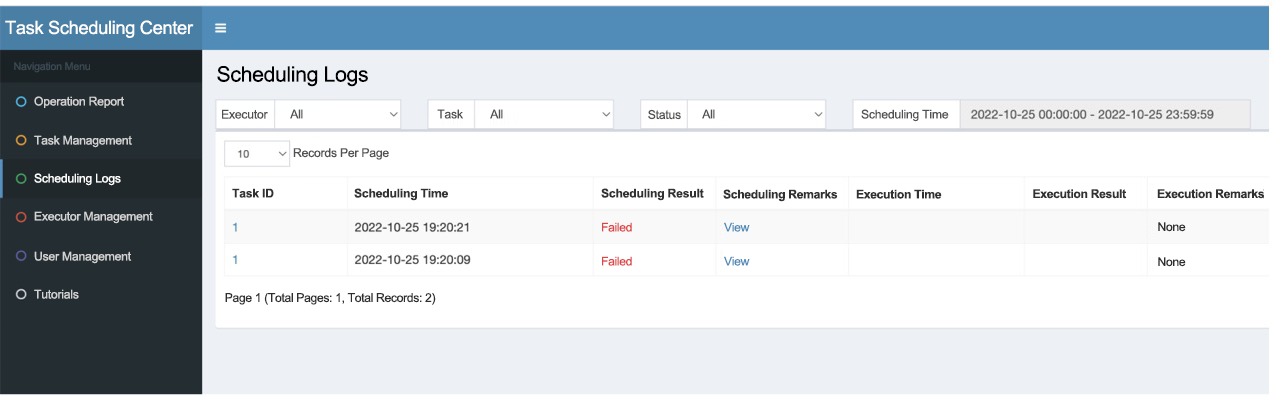
<style>
.page{position:relative;width:1274px;height:397px;background:#ffffff}
.page>*{position:absolute;margin:0}
.t1{font:18.3px "ArialMT";letter-spacing:-0.02em;color:#ffffff}
.t2{font:10.7px "ArialMT";letter-spacing:-0.02em;color:#3b4952}
.t3{font:21.4px "ArialMT";letter-spacing:-0.02em;color:#000000}
.t4{font:12.2px "ArialMT";letter-spacing:-0.02em;color:#d2d2d2}
.t5{font:12.2px "ArialMT";letter-spacing:-0.02em;color:#515151}
.t6{font:12.2px "ArialMT";letter-spacing:-0.02em;color:#ffffff}
.t7{font:12.2px "Arial-BoldMT";letter-spacing:-0.02em;color:#313131}
.t8{font:12.2px "Arial-BoldMT";letter-spacing:-0.03em;color:#313131}
.t9{font:12.2px "ArialMT";letter-spacing:-0.03em;color:#de4747}
.t10{font:12.2px "ArialMT";letter-spacing:-0.03em;color:#518cb8}
.t11{font:12.2px "ArialMT";letter-spacing:-0.03em;color:#2e2e2e}
</style>
<div class="page">
<p class="t1" style="left:5px;top:20px;width:189px;height:18px">Task Scheduling Center</p>
<p class="t2" style="left:14px;top:62px;width:76px;height:11px">Navigation Menu</p>
<p class="t3" style="left:217px;top:66px;width:151px;height:21px">Scheduling Logs</p>
<p class="t4" style="left:34px;top:96px;width:90px;height:12px">Operation Report</p>
<p class="t5" style="left:222px;top:109px;width:46px;height:10px">Executor</p>
<p class="t5" style="left:290px;top:109px;width:13px;height:10px">All</p>
<p class="t5" style="left:437px;top:109px;width:26px;height:10px">Task</p>
<p class="t5" style="left:490px;top:109px;width:13px;height:10px">All</p>
<p class="t5" style="left:648px;top:109px;width:33px;height:11px">Status</p>
<p class="t5" style="left:702px;top:109px;width:13px;height:10px">All</p>
<p class="t5" style="left:861px;top:109px;width:88px;height:13px">Scheduling Time</p>
<p class="t4" style="left:34px;top:135px;width:98px;height:13px">Task Management</p>
<p class="t5" style="left:293px;top:148px;width:96px;height:12px">Records Per Page</p>
<p class="t6" style="left:34px;top:173px;width:87px;height:13px">Scheduling Logs</p>
<p class="t7" style="left:232px;top:188px;width:42px;height:10px">Task ID</p>
<p class="t7" style="left:354px;top:188px;width:94px;height:13px">Scheduling Time</p>
<p class="t7" style="left:601px;top:188px;width:103px;height:13px">Scheduling Result</p>
<p class="t8" style="left:723px;top:189px;width:115px;height:13px">Scheduling Remarks</p>
<p class="t8" style="left:856px;top:189px;width:86px;height:10px">Execution Time</p>
<p class="t8" style="left:1033px;top:189px;width:94px;height:10px">Execution Result</p>
<p class="t8" style="left:1157px;top:189px;width:107px;height:10px">Execution Remarks</p>
<p class="t4" style="left:34px;top:211px;width:119px;height:13px">Executor Management</p>
<p class="t9" style="left:602px;top:222px;width:30px;height:10px">Failed</p>
<p class="t10" style="left:724px;top:222px;width:26px;height:10px">View</p>
<p class="t11" style="left:1158px;top:222px;width:28px;height:10px">None</p>
<p class="t4" style="left:34px;top:251px;width:98px;height:13px">User Management</p>
<p class="t9" style="left:602px;top:256px;width:30px;height:10px">Failed</p>
<p class="t10" style="left:724px;top:256px;width:26px;height:10px">View</p>
<p class="t11" style="left:1158px;top:257px;width:28px;height:10px">None</p>
<p class="t4" style="left:34px;top:289px;width:45px;height:10px">Tutorials</p>
<p class="t11" style="left:225px;top:293px;width:211px;height:12px">Page 1 (Total Pages: 1, Total Records: 2)</p>
</div>
